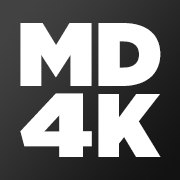
<style>
.page{position:relative;width:180px;height:180px;background:#ffffff}
.page>*{position:absolute;margin:0}
.t1{font:90px "Gotham-Ultra";color:#ffffff}
.t2{font:90px "Gotham-Ultra";color:#ffffff;scale:1.15 1}
.t3{font:90px "Gotham-Ultra";color:#ffffff;scale:0.97 1}
</style>
<div class="page">
<p class="t1" style="left:20px;top:23px;width:141px;height:63px">MD</p>
<p class="t2" style="left:20px;top:93px;width:72px;height:64px">4</p>
<p class="t3" style="left:98px;top:94px;width:63px;height:63px">K</p>
</div>
